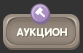
<style>
.page{position:relative;width:83px;height:53px;background:#333333}
.page>*{position:absolute;margin:0}
.t1{font:10px "RotondaC-Bold";letter-spacing:0.06em;color:#fbfdf5;text-transform:uppercase}
</style>
<div class="page">
<p class="t1" style="left:16px;top:28px;width:51px;height:10px">аукцион</p>
</div>
